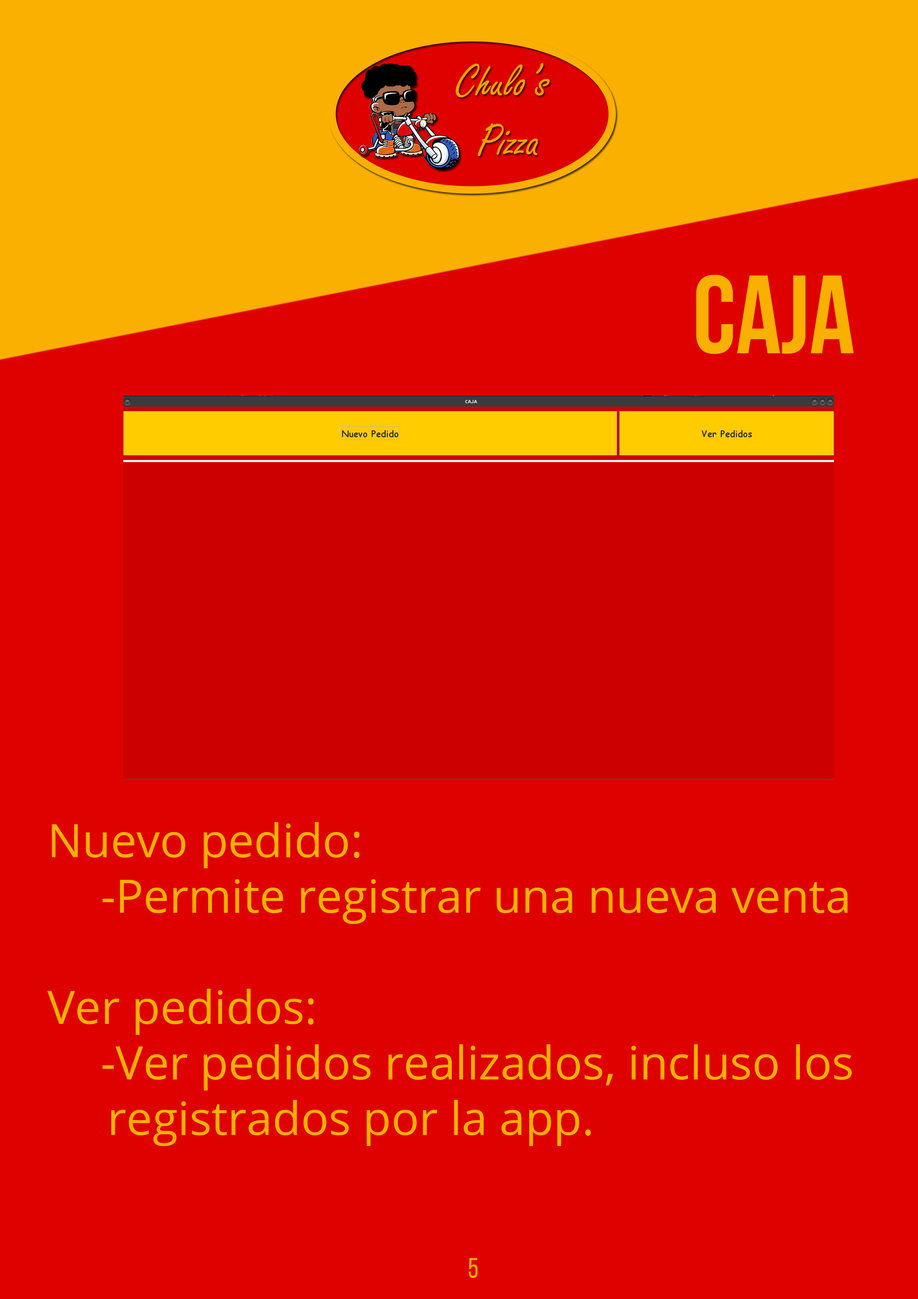
<style>
.page{position:relative;width:918px;height:1299px;background:#df0000}
.page>*{position:absolute;margin:0}
.t1{font:111.1px "BebasNeueBold";color:#fab000}
.t2{font:46.3px "OpenSans";color:#fab000}
.t3{font:27.8px "BebasNeueRegular";color:#fab000}
</style>
<div class="page">
<p class="t1" style="left:696px;top:275px;width:158px;height:79px">CAJA</p>
<p class="t2" style="left:47px;top:822px;width:805px;height:324px">Nuevo pedido:<br>    -Permite registrar una nueva venta<br><br>Ver pedidos:<br>    -Ver pedidos realizados, incluso los        registrados por la app.</p>
<p class="t3" style="left:469px;top:1258px;width:9px;height:20px">5</p>
</div>
